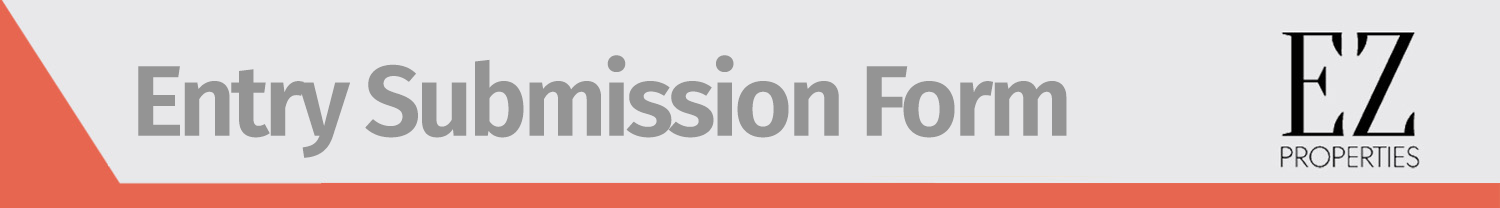
<style>
.page{position:relative;width:1500px;height:208px;background:#e8e8ea}
.page>*{position:absolute;margin:0}
.t1{font:100px "FiraSans-SemiBold";letter-spacing:-0.05em;color:#949494}
</style>
<div class="page">
<p class="t1" style="left:138px;top:55px;width:929px;height:103px">Entry Submission Form</p>
</div>
